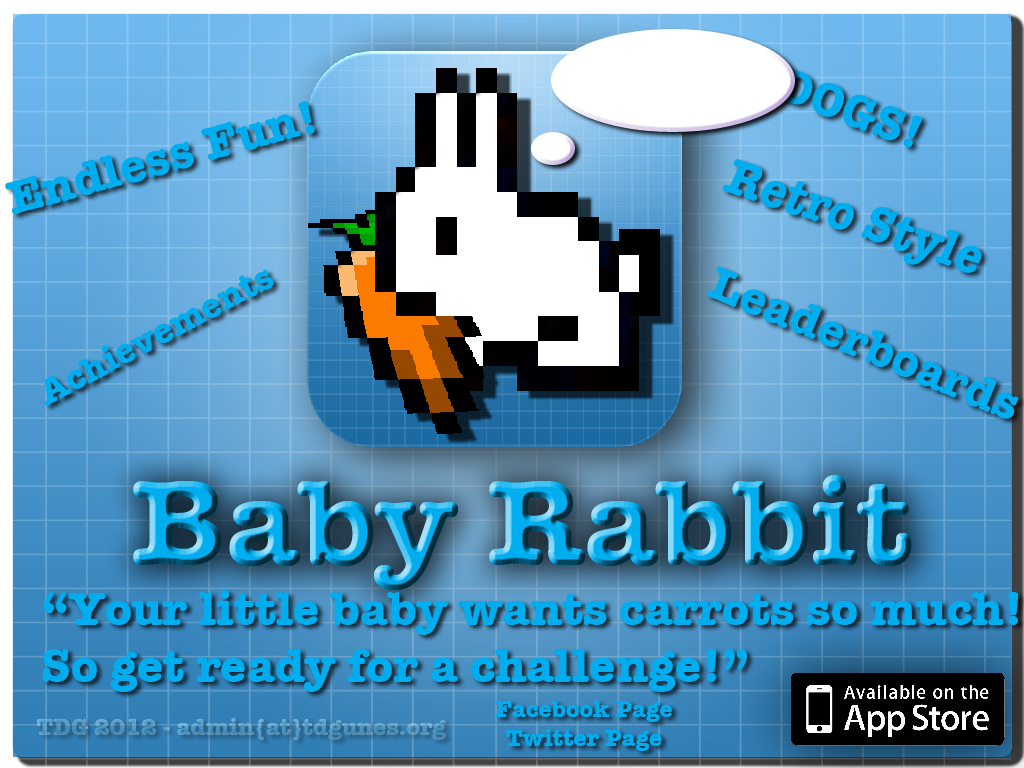
<style>
.page{position:relative;width:1024px;height:768px}
.page>*{position:absolute;margin:0}
.t1{font:48px "AmericanTypewriter-Bold";color:#00aeef}
.t2{font:52px "AmericanTypewriter-Bold";color:#00aeef;scale:0.91 1}
.t3{font:36px "AmericanTypewriter-Bold";color:#00aeef}
.t4{font:123.4px "AmericanTypewriter-Bold"}
.t5{font:24px "AmericanTypewriter-Bold";color:#00aeef}
.t6{font:24px "AmericanTypewriter-Bold";color:#5597be}
</style>
<div class="page">
<p class="t1" style="left:774px;top:67px;width:148px;height:81px;rotate:21deg">DOGS!</p>
<p class="t1" style="left:5px;top:101px;width:310px;height:114px;rotate:-15deg">Endless Fun!</p>
<p class="t2" style="left:722px;top:159px;width:260px;height:114px;rotate:18deg">Retro Style</p>
<p class="t3" style="left:44px;top:269px;width:230px;height:137px;rotate:-28deg">Achievements</p>
<p class="t1" style="left:706px;top:266px;width:313px;height:153px;rotate:22deg">Leaderboards</p>
<p class="t4" style="left:133px;top:475px;width:779px;height:115px">Baby Rabbit</p>
<p class="t1" style="left:42px;top:590px;width:977px;height:102px">“Your little baby wants carrots so much!<br>So get ready for a challenge!”</p>
<p class="t5" style="left:495px;top:701px;width:177px;height:21px">Facebook Page</p>
<p class="t6" style="left:36px;top:718px;width:410px;height:22px">TDG 2012 - admin{at}tdgunes.org</p>
<p class="t5" style="left:506px;top:729px;width:156px;height:22px">Twitter Page</p>
</div>
